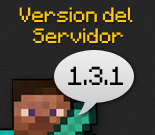
<style>
.page{position:relative;width:155px;height:135px}
.page>*{position:absolute;margin:0}
.t1{font:16.7px/20.8px "Minecraft";color:#ffcc00}
.t2{font:20.8px "Minecraft";color:#000000}
</style>
<div class="page">
<p class="t1" style="left:19px;top:7px;width:114px;height:37px;text-align:center">Version del <br>Servidor</p>
<p class="t2" style="left:68px;top:66px;width:55px;height:19px">1.3.1</p>
</div>
